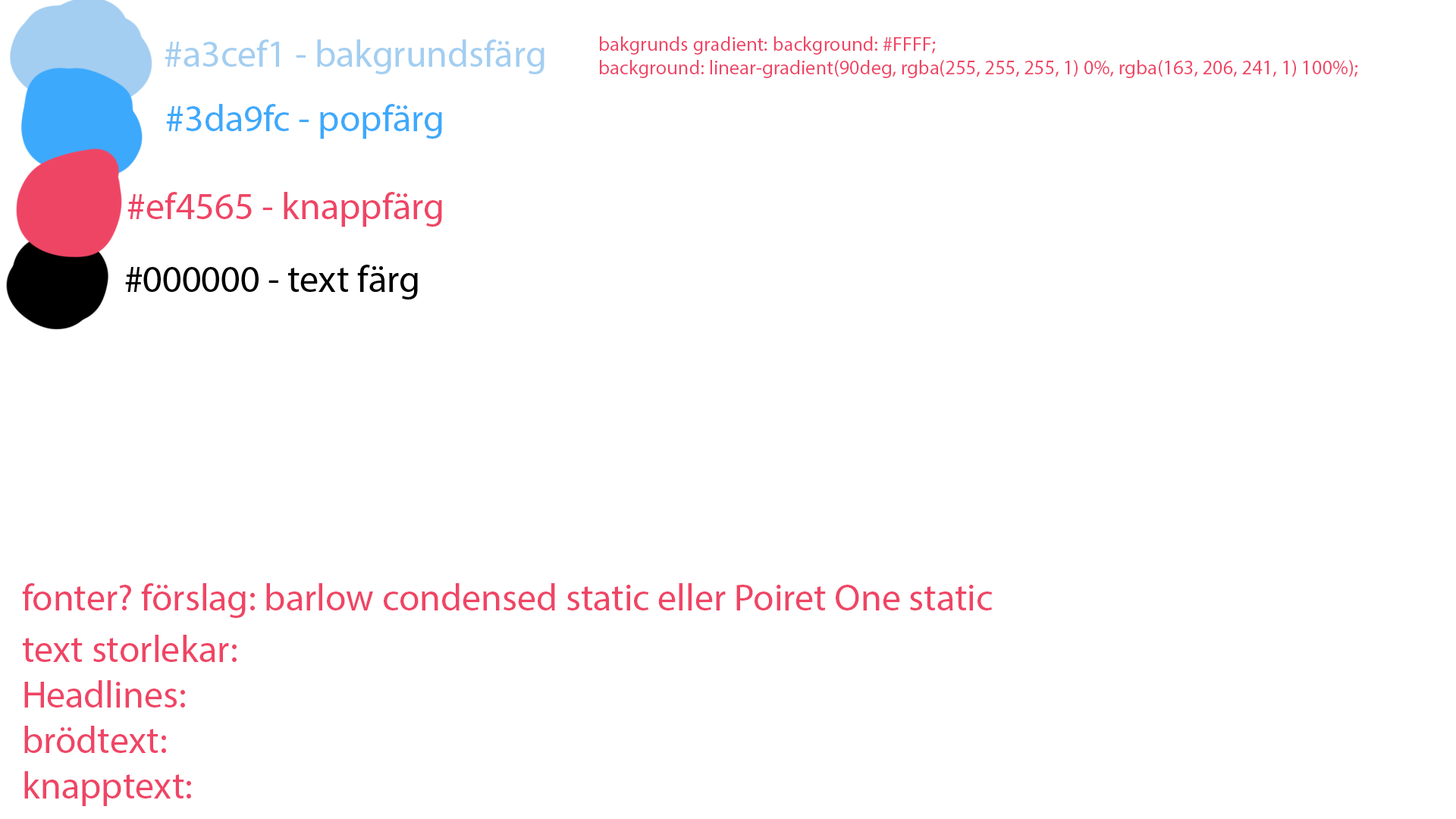
<style>
.page{position:relative;width:1456px;height:819px;background:#ffffff}
.page>*{position:absolute;margin:0}
.t1{font:37.9px "MyriadPro-Regular";color:#a3cef1}
.t2{font:20.1px "MyriadPro-Regular";color:#ef4565}
.t3{font:37.9px "MyriadPro-Regular";color:#3da9fc}
.t4{font:37.9px "MyriadPro-Regular";color:#ef4565}
</style>
<div class="page">
<p class="t1" style="left:165px;top:39px;width:379px;height:35px">#a3cef1 - bakgrundsfärg</p>
<p class="t2" style="left:600px;top:36px;width:758px;height:42px">bakgrunds gradient: background: #FFFF;<br>background: linear-gradient(90deg, rgba(255, 255, 255, 1) 0%, rgba(163, 206, 241, 1) 100%);</p>
<p class="t3" style="left:166px;top:104px;width:276px;height:35px">#3da9fc - popfärg</p>
<p class="t4" style="left:127px;top:192px;width:315px;height:35px">#ef4565 - knappfärg</p>
<p class="t4" style="left:22px;top:583px;width:970px;height:35px">fonter? förslag: barlow condensed static eller Poiret One static</p>
<p class="t4" style="left:23px;top:635px;width:214px;height:171px">text storlekar: <br>Headlines: <br>brödtext:<br>knapptext:</p>
</div>
